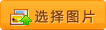
<style>
.page{position:relative;width:106px;height:30px}
.page>*{position:absolute;margin:0}
.t1{font:13px "MicrosoftYaHei";letter-spacing:0.2em;color:#843a06}
.t2{font:13px "MicrosoftYaHei";letter-spacing:0.2em}
</style>
<div class="page">
<p class="t1" style="left:35px;top:10px;width:60px;height:13px">选择图片</p>
<p class="t2" style="left:36px;top:11px;width:60px;height:13px">选择图片</p>
</div>
